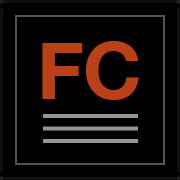
<style>
.page{position:relative;width:180px;height:180px;background:#000000}
.page>*{position:absolute;margin:0}
.t1{font:78.8px "HelveticaNeue-Bold";color:#ba4016}
</style>
<div class="page">
<p class="t1" style="left:42px;top:41px;width:97px;height:59px">FC</p>
</div>
